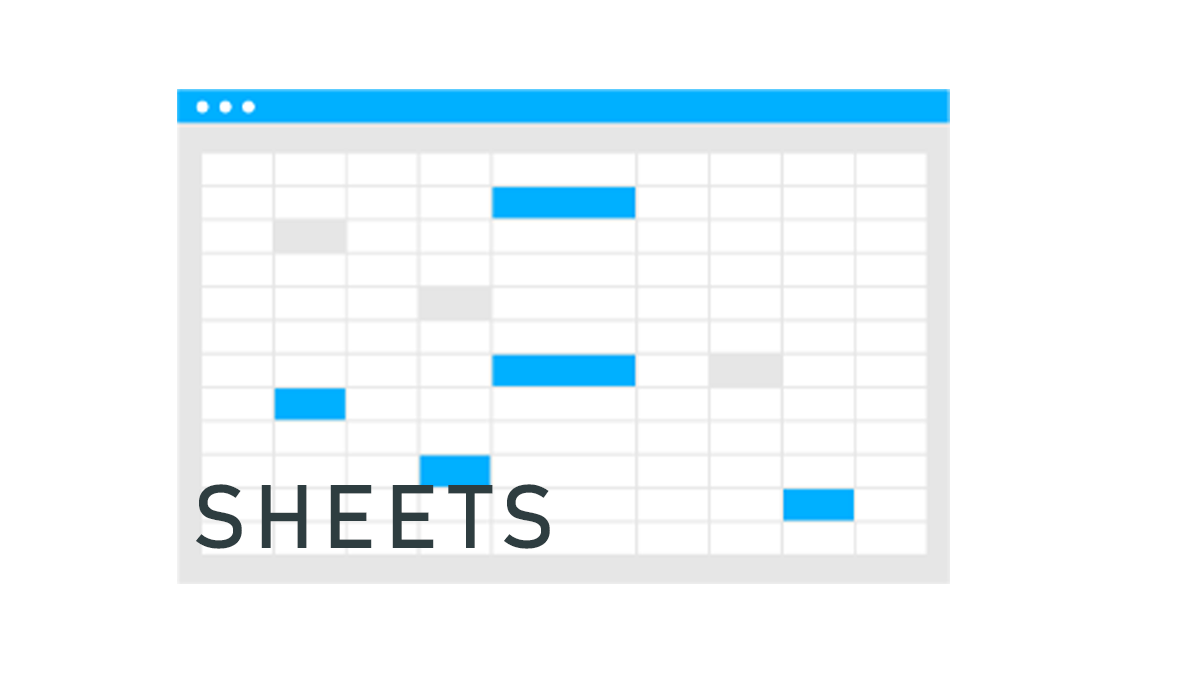
<style>
.page{position:relative;width:1200px;height:700px;background:#ffffff}
.page>*{position:absolute;margin:0}
.t1{font:88.6px "Bahnschrift";letter-spacing:0.1em;color:#2e3d40;font-weight:bold}
</style>
<div class="page">
<p class="t1" style="left:196px;top:484px;width:354px;height:65px">SHEETS</p>
</div>
